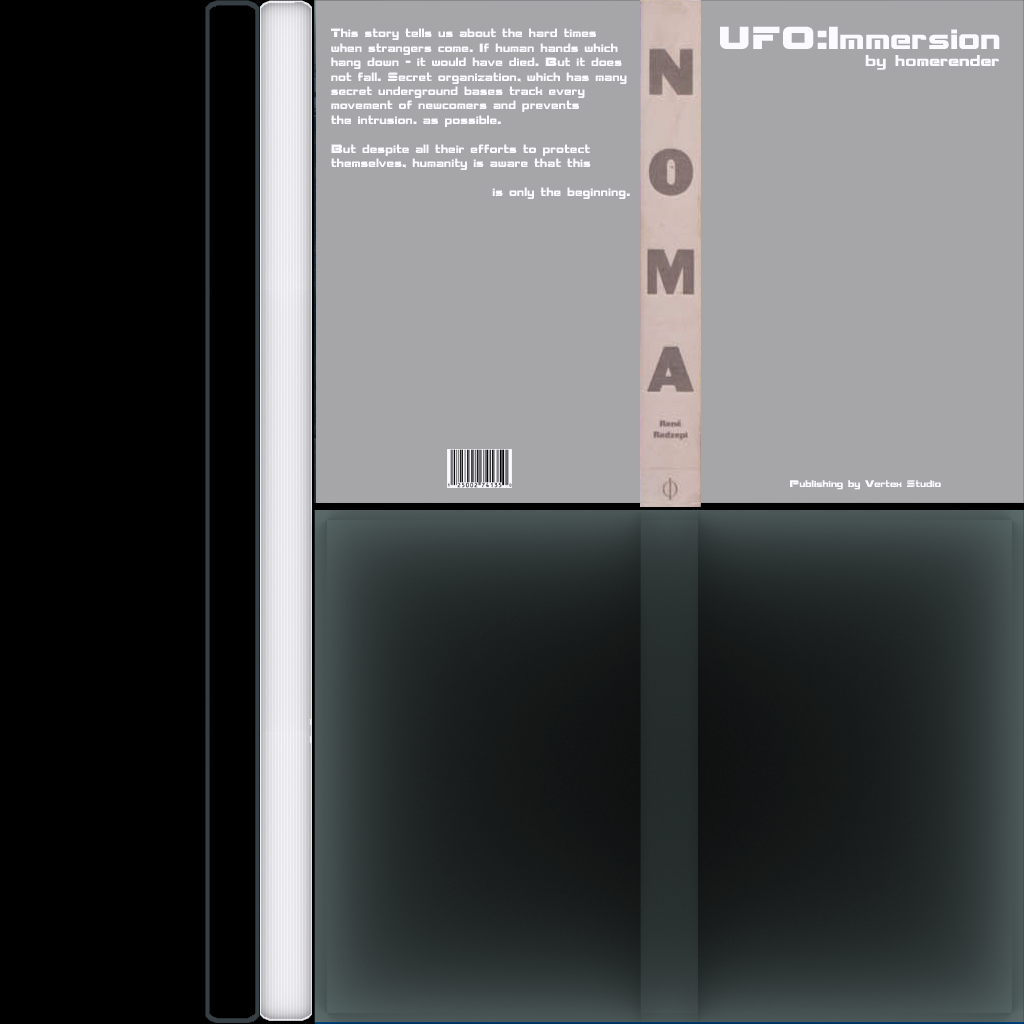
<style>
.page{position:relative;width:1024px;height:1024px;background:#a6a6a9}
.page>*{position:absolute;margin:0}
.t1{font:12px "AksentNormal";color:#ffffff}
.t2{font:31.4px "AksentNormal";color:#ffffff;scale:1.07 1}
.t3{font:15.8px "AksentNormal";color:#ffffff;scale:1.07 1}
.t4{font:9.7px "AksentNormal";color:#ffffff}
</style>
<div class="page">
<p class="t1" style="left:331px;top:28px;width:299px;height:171px">This story tells us about the hard times <br>when strangers come. If human hands which <br>hang down - it would have died. But it does <br>not fall. Secret organization, which has many <br>secret underground bases track every <br>movement of newcomers and prevents <br>the intrusion. as possible. <br><br>But despite all their efforts to protect <br>themselves, humanity is aware that this <br>    <br>       is only the beginning.</p>
<p class="t2" style="left:720px;top:26px;width:280px;height:23px">UFO:Immersion</p>
<p class="t3" style="left:865px;top:55px;width:134px;height:15px">by homerender</p>
<p class="t4" style="left:790px;top:480px;width:151px;height:10px">Publishing by Vertex Studio</p>
</div>
